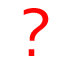
<style>
.page{position:relative;width:64px;height:64px;background:#ffffff}
.page>*{position:absolute;margin:0}
.t1{font:72px "Corbel";color:#fe0404}
</style>
<div class="page">
<p class="t1" style="left:23px;top:8px;width:26px;height:48px">?</p>
</div>
